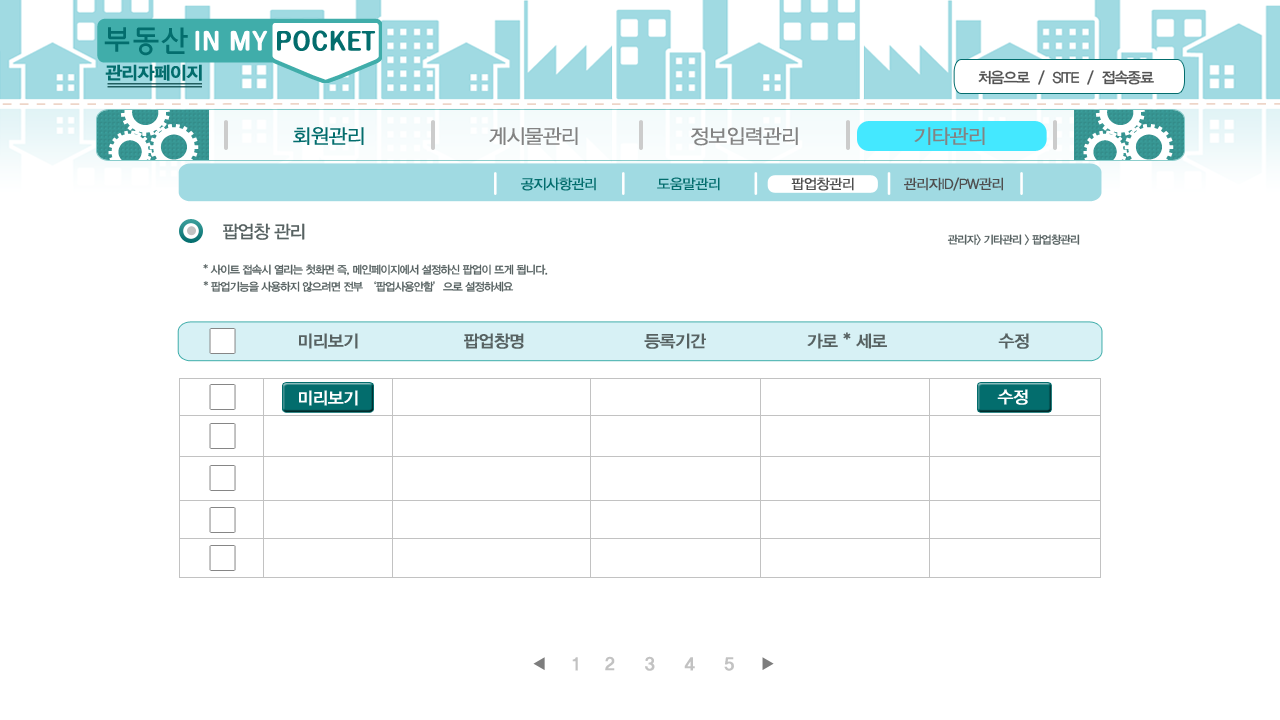
<style>
.page{position:relative;width:1280px;height:720px;background:#ffffff}
.page>*{position:absolute;margin:0}
.t1{font:17.8px "YDIYGO340";letter-spacing:-0.04em;color:#036d6d;font-weight:bold}
.t2{font:15px "YDIYGO330";letter-spacing:-0.06em;color:#535353}
.t3{font:20px "YDIYGO320";letter-spacing:-0.04em;color:#036d6d;font-weight:bold}
.t4{font:20px "YDIYGO320";letter-spacing:-0.04em;color:#838383;font-weight:bold}
.t5{font:14px "YDIYGO320";letter-spacing:-0.04em;color:#036d6d;font-weight:bold}
.t6{font:14px "YDIYGO320";letter-spacing:-0.04em;color:#4f4f4f;font-weight:bold}
.t7{font:18px "YDIYGO330";letter-spacing:-0.06em;color:#576262}
.t8{font:11px "YDIYGO330";letter-spacing:-0.06em;color:#576262}
.t9{font:16.8px "YDIYGO330";letter-spacing:-0.04em;color:#576262;font-weight:bold}
.t10{font:16.8px "YDIYGO330";letter-spacing:-0.04em;color:#ffffff;font-weight:bold}
.t11{font:17.8px "YDIYGO340";letter-spacing:-0.04em;color:#c2c2c2;font-weight:bold}
</style>
<div class="page">
<p class="t1" style="left:105px;top:64px;width:97px;height:17px">관리자페이지</p>
<p class="t2" style="left:978px;top:70px;width:176px;height:15px">처음으로  /  SITE  /  접속종료</p>
<p class="t3" style="left:293px;top:127px;width:71px;height:18px">회원관리</p>
<p class="t4" style="left:489px;top:127px;width:89px;height:18px">게시물관리</p>
<p class="t4" style="left:691px;top:127px;width:107px;height:19px">정보입력관리</p>
<p class="t4" style="left:914px;top:127px;width:71px;height:18px">기타관리</p>
<p class="t5" style="left:521px;top:177px;width:75px;height:14px">공지사항관리</p>
<p class="t5" style="left:657px;top:177px;width:63px;height:14px">도움말관리</p>
<p class="t6" style="left:791px;top:177px;width:63px;height:14px">팝업창관리</p>
<p class="t6" style="left:904px;top:177px;width:99px;height:14px">관리자ID/PW관리</p>
<p class="t7" style="left:223px;top:223px;width:82px;height:17px">팝업창 관리</p>
<p class="t8" style="left:947px;top:234px;width:133px;height:12px">관리자&gt; 기타관리 &gt; 팝업창관리</p>
<p class="t8" style="left:203px;top:264px;width:345px;height:12px">* 사이트 접속시 열리는 첫화면 즉, 메인페이지에서 설정하신 팝업이 뜨게 됩니다.</p>
<p class="t8" style="left:203px;top:281px;width:311px;height:11px">* 팝업기능을 사용하지 않으려면 전부 ‘팝업사용안함’으로 설정하세요</p>
<p class="t9" style="left:299px;top:333px;width:59px;height:16px">미리보기</p>
<p class="t9" style="left:464px;top:333px;width:60px;height:16px">팝업창명</p>
<p class="t9" style="left:644px;top:333px;width:62px;height:16px">등록기간</p>
<p class="t9" style="left:807px;top:332px;width:80px;height:17px">가로 * 세로</p>
<p class="t9" style="left:998px;top:333px;width:31px;height:16px">수정</p>
<p class="t10" style="left:299px;top:390px;width:59px;height:16px">미리보기</p>
<p class="t10" style="left:997px;top:389px;width:31px;height:16px">수정</p>
<p class="t11" style="left:572px;top:656px;width:162px;height:15px">1    2     3     4     5</p>
</div>
